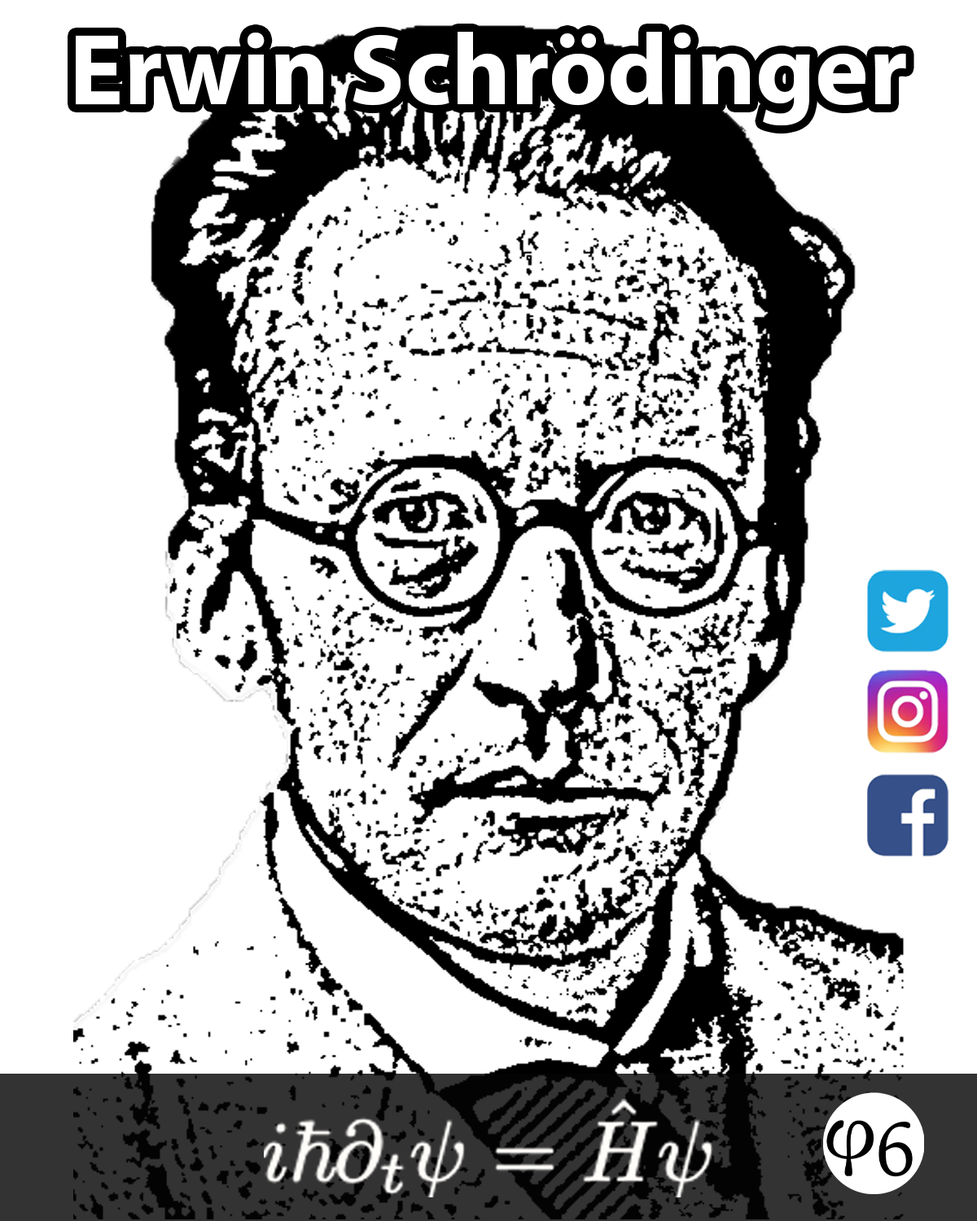
<style>
.page{position:relative;width:977px;height:1221px;background:#ffffff}
.page>*{position:absolute;margin:0}
.t1{font:101.7px "MyriadPro-Bold";color:#ffffff}
</style>
<div class="page">
<p class="t1" style="left:76px;top:32px;width:830px;height:93px">Erwin Schrödinger</p>
</div>
